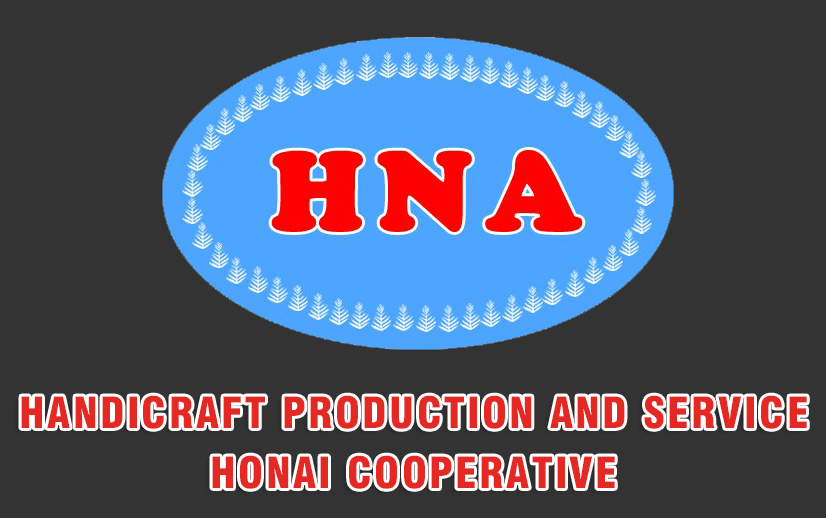
<style>
.page{position:relative;width:826px;height:518px;background:#333333}
.page>*{position:absolute;margin:0}
.t1{font:42px/60px "UTM-Swiss-721-Black-Condensed";letter-spacing:0.056em;color:#e42924;text-transform:uppercase}
</style>
<div class="page">
<p class="t1" style="left:21px;top:395px;width:786px;height:94px;text-align:center">Handicraft Production And Service<br>Honai Cooperative</p>
</div>
